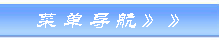
<style>
.page{position:relative;width:219px;height:40px}
.page>*{position:absolute;margin:0}
.t1{font:22px "STLiti";letter-spacing:0.2em;color:#ffffff;font-style:italic}
</style>
<div class="page">
<p class="t1" style="left:37px;top:13px;width:142px;height:15px">菜单导航》》</p>
</div>
